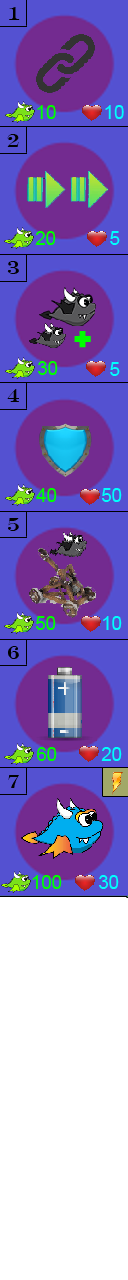
<style>
.page{position:relative;width:128px;height:1280px;background:#ffffff}
.page>*{position:absolute;margin:0}
.t1{font:18.7px "EngraversMT";color:#000000}
.t2{font:18.7px "ArialMT";color:#00ff00}
.t3{font:18.7px "ArialMT";color:#00fefe}
</style>
<div class="page">
<p class="t1" style="left:9px;top:7px;width:11px;height:13px">1</p>
<p class="t2" style="left:37px;top:105px;width:19px;height:14px">10</p>
<p class="t3" style="left:105px;top:105px;width:19px;height:14px">10</p>
<p class="t1" style="left:7px;top:134px;width:12px;height:13px">2</p>
<p class="t2" style="left:35px;top:231px;width:21px;height:14px">20</p>
<p class="t3" style="left:110px;top:231px;width:10px;height:14px">5</p>
<p class="t1" style="left:7px;top:261px;width:12px;height:13px">3</p>
<p class="t2" style="left:38px;top:361px;width:20px;height:14px">30</p>
<p class="t3" style="left:110px;top:362px;width:10px;height:14px">5</p>
<p class="t1" style="left:7px;top:389px;width:12px;height:13px">4</p>
<p class="t2" style="left:36px;top:488px;width:21px;height:14px">40</p>
<p class="t3" style="left:102px;top:488px;width:20px;height:14px">50</p>
<p class="t1" style="left:8px;top:518px;width:11px;height:13px">5</p>
<p class="t2" style="left:36px;top:616px;width:20px;height:14px">50</p>
<p class="t3" style="left:103px;top:616px;width:19px;height:14px">10</p>
<p class="t1" style="left:8px;top:646px;width:11px;height:13px">6</p>
<p class="t2" style="left:37px;top:747px;width:20px;height:14px">60</p>
<p class="t3" style="left:101px;top:747px;width:21px;height:14px">20</p>
<p class="t1" style="left:8px;top:775px;width:11px;height:13px">7</p>
<p class="t2" style="left:32px;top:875px;width:30px;height:14px">100</p>
<p class="t3" style="left:99px;top:875px;width:20px;height:14px">30</p>
</div>
